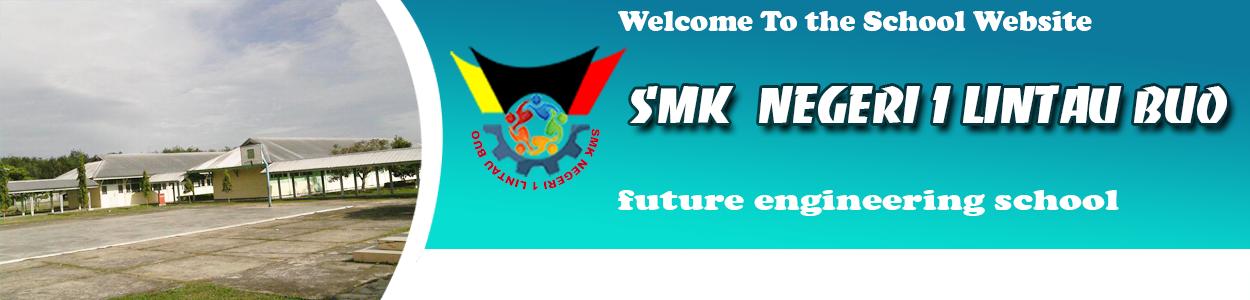
<style>
.page{position:relative;width:1250px;height:300px}
.page>*{position:absolute;margin:0}
.t1{font:30px "CooperBlack";color:#ffffff}
.t2{font:45.6px "Banco";color:#ffffff;scale:1.12 1}
.t3{font:11.2px "Arial-Black";color:#c7011d}
.t4{font:30.3px "CooperBlack";color:#ffffff;scale:1.27 1}
</style>
<div class="page">
<p class="t1" style="left:618px;top:11px;width:474px;height:20px">Welcome To the School Website</p>
<p class="t2" style="left:630px;top:85px;width:597px;height:38px">SMK  NEGERI 1 LINTAU BUO</p>
<p class="t3" style="left:471px;top:128px;width:129px;height:63px;rotate:1deg">SMK NEGERI 1 LINTAU BUO</p>
<p class="t4" style="left:618px;top:190px;width:501px;height:26px">future engineering school</p>
</div>
